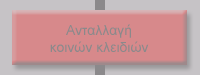
<style>
.page{position:relative;width:200px;height:75px;background:#d7898b}
.page>*{position:absolute;margin:0}
.t1{font:14px "ArialMT";color:#8b898b}
</style>
<div class="page">
<p class="t1" style="left:50px;top:24px;width:99px;height:28px;text-align:center">Ανταλλαγή<br>κοινών κλειδιών</p>
</div>
